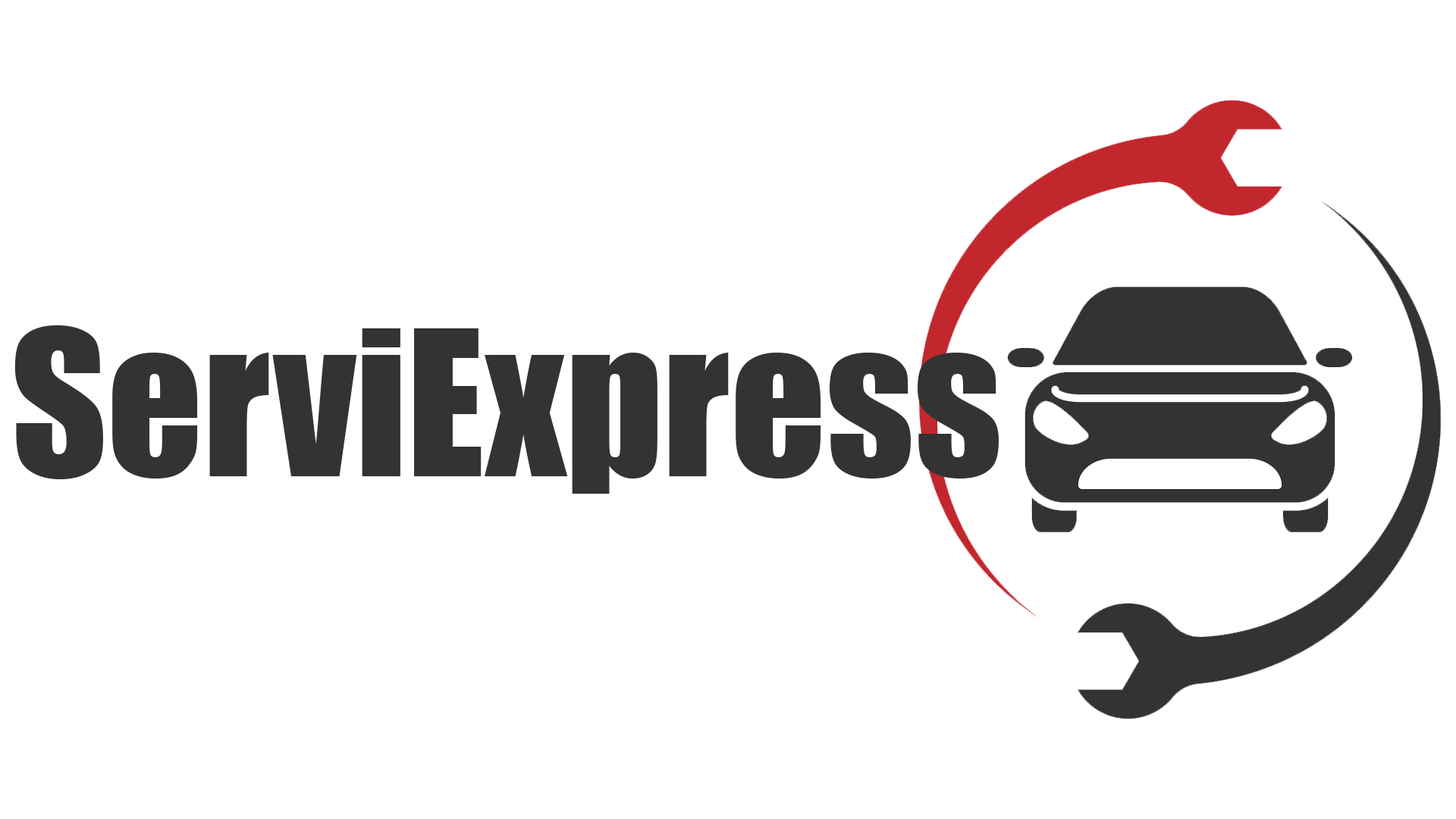
<style>
.page{position:relative;width:1456px;height:819px;background:#ffffff}
.page>*{position:absolute;margin:0}
.t1{font:187.3px "Impact";color:#333333}
</style>
<div class="page">
<p class="t1" style="left:14px;top:325px;width:985px;height:169px">ServiExpress</p>
</div>
